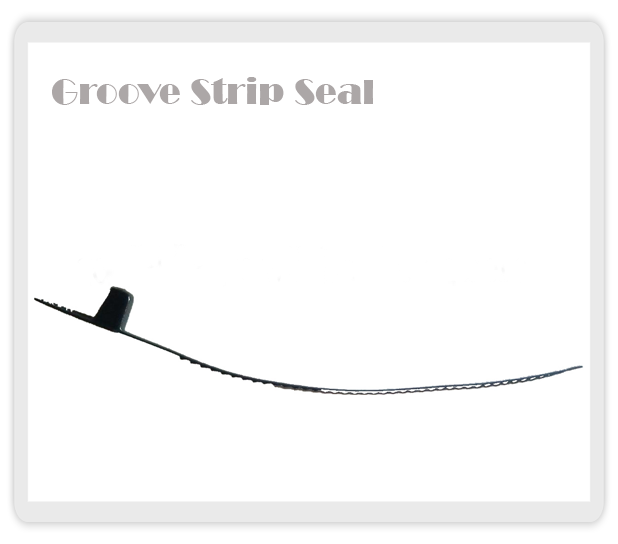
<style>
.page{position:relative;width:618px;height:544px;background:#ffffff}
.page>*{position:absolute;margin:0}
.t1{font:36px "Broadway";color:#aca7a7}
</style>
<div class="page">
<p class="t1" style="left:52px;top:77px;width:321px;height:28px">Groove Strip Seal</p>
</div>
